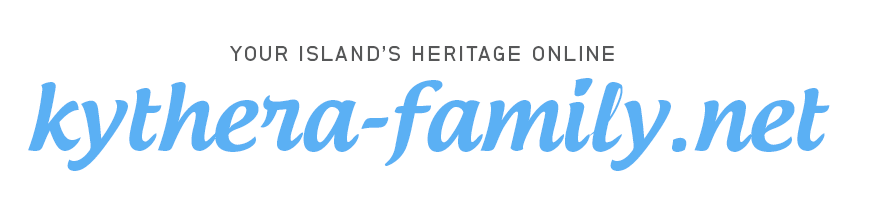
<style>
.page{position:relative;width:880px;height:210px;background:#ffffff}
.page>*{position:absolute;margin:0}
.t1{font:36px "NeubauGrotesk-Hal";letter-spacing:0.1em;color:#565758;text-transform:uppercase}
.t2{font:160px "AndrogyneMedium";color:#5bb0f4}
</style>
<div class="page">
<p class="t1" style="left:230px;top:46px;width:384px;height:15px">your island’s heritage online</p>
<p class="t2" style="left:28px;top:78px;width:802px;height:93px">kythera-family.net</p>
</div>
